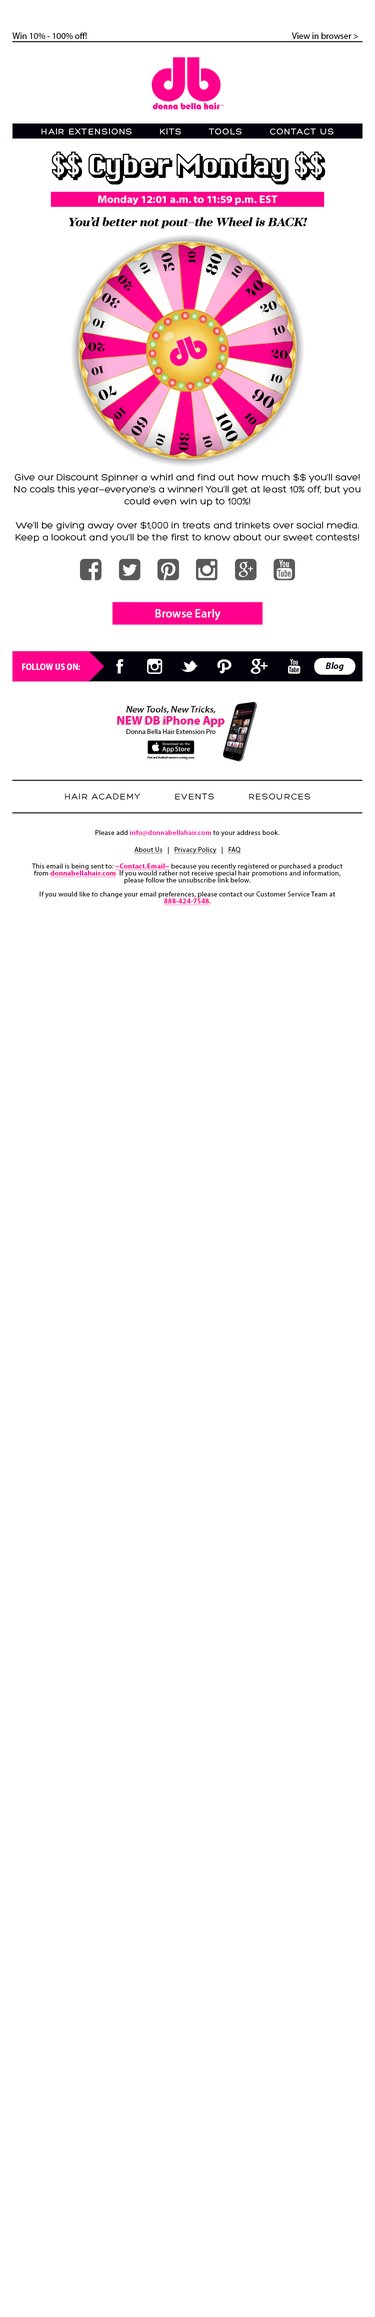
<style>
.page{position:relative;width:375px;height:2317px;background:#ffffff}
.page>*{position:absolute;margin:0}
.t1{font:9px "MyriadPro-Regular";color:#000000}
.t2{font:9px "Hero";letter-spacing:0.1em;color:#ffffff}
.t3{font:10.5px "MyriadPro-BoldSemiExt";color:#ffffff}
.t4{font:10px "Hero";color:#000000}
.t5{font:10px "MyriadPro-Regular";color:#000000}
.t6{font:12px "MyriadPro-Semibold";color:#ffffff}
.t7{font:9px "MyriadPro-BoldSemiCn";color:#ffffff}
.t8{font:9.3px "MyriadPro-BoldIt";color:#01000b}
.t9{font:9px "MyriadPro-SemiboldSemiExtIt";color:#000000}
.t10{font:12px "MyriadPro-Bold";color:#ff008c}
.t11{font:7px "MyriadPro-Regular";color:#000000}
.t12{font:3px "MyriadPro-It";color:#000000}
.t13{font:9px "Hero";letter-spacing:0.1em;color:#01000b}
.t14{font:7px/7px "MyriadPro-Regular";letter-spacing:0.025em;color:#000000}
.t15{font:7px "MyriadPro-Regular";letter-spacing:0.025em;color:#000000}
.t16{font:7px "MyriadPro-Semibold";letter-spacing:0.025em;color:#ff008c}
.t17{font:7px "MyriadPro-Regular";letter-spacing:0.025em;color:#000000;text-decoration:underline}
.t18{font:7px "MyriadPro-Bold";letter-spacing:0.025em;color:#ff008c;text-decoration:underline}
.t19{font:7px/7px "MyriadPro-Bold";letter-spacing:0.025em;color:#ff008c;text-decoration:underline}
</style>
<div class="page">
<p class="t1" style="left:12px;top:32px;width:346px;height:7px">Win 10%­ - 100% off!                        View in browser &gt;</p>
<p class="t2" style="left:42px;top:128px;width:292px;height:7px">HAIR EXTENSIONS        KITS        TOOLS        CONTACT US</p>
<p class="t3" style="left:98px;top:196px;width:180px;height:9px">Monday 12:01 a.m. to 11:59 p.m. EST</p>
<p class="t4" style="left:14px;top:473px;width:346px;height:70px;text-align:center">Give our Discount Spinner a whirl and find out how much $$ you’ll save! No coals this year<span class="t5">−</span>everyone’s a winner! You’ll get at least 10% off, but you could even win up to 100%! <br><br>We’ll be giving away over $1,000 in treats and trinkets over social media. Keep a lookout and you’ll be the first to know about our sweet contests!</p>
<p class="t6" style="left:156px;top:609px;width:64px;height:11px">Browse Early</p>
<p class="t7" style="left:22px;top:664px;width:58px;height:6px">FOLLOW US ON:</p>
<p class="t8" style="left:326px;top:662px;width:18px;height:9px">Blog</p>
<p class="t9" style="left:126px;top:706px;width:90px;height:8px">New Tools, New Tricks,</p>
<p class="t10" style="left:118px;top:716px;width:106px;height:11px">NEW DB iPhone App</p>
<p class="t11" style="left:126px;top:729px;width:90px;height:5px">Donna Bella Hair Extension Pro</p>
<p class="t12" style="left:147px;top:756px;width:47px;height:4px">iPad and Android versions coming soon.</p>
<p class="t13" style="left:65px;top:793px;width:245px;height:7px">HAIR ACADEMY          EVENTS          RESOURCES</p>
<p class="t14" style="left:32px;top:830px;width:310px;height:76px;text-align:center"><span class="t15">Please add </span><span class="t16">info@donnabellahair.com</span><span class="t15"> to your address book.<br><br></span><span class="t17">About Us</span><span class="t15">   |   </span><span class="t17">Privacy Policy</span><span class="t15">   |   </span><span class="t17">FAQ<br></span><span class="t15"><br>This email is being sent to: </span><span class="t18">~Contact.Email~</span><span class="t15"> because you recently registered </span>or purchased a product from <span class="t19">donnabellahair.com</span>  If you would rather not receive special hair promotions and information, please follow the unsubscribe link below.<br><br>If you would like to change your email preferences, please contact our Customer Service Team at <span class="t19">888-424-7548</span>.</p>
</div>
